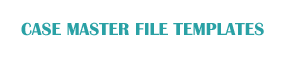
<style>
.page{position:relative;width:300px;height:60px;background:#ffffff}
.page>*{position:absolute;margin:0}
.t1{font:18px "BritannicBold";color:#2aa1a5}
</style>
<div class="page">
<p class="t1" style="left:21px;top:22px;width:243px;height:14px">CASE MASTER FILE TEMPLATES</p>
</div>
